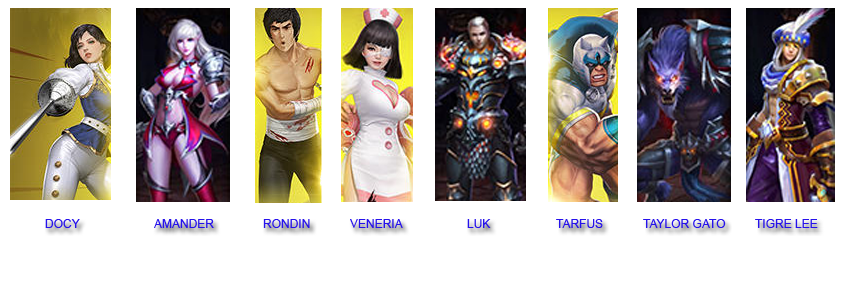
<style>
.page{position:relative;width:850px;height:300px;background:#ffffff}
.page>*{position:absolute;margin:0}
.t1{font:12px "ArialMT";color:#2612ec}
</style>
<div class="page">
<p class="t1" style="left:45px;top:219px;width:35px;height:9px">DOCY</p>
<p class="t1" style="left:154px;top:219px;width:60px;height:9px">AMANDER</p>
<p class="t1" style="left:263px;top:219px;width:47px;height:9px">RONDIN</p>
<p class="t1" style="left:350px;top:219px;width:53px;height:9px">VENERIA</p>
<p class="t1" style="left:467px;top:219px;width:24px;height:9px">LUK</p>
<p class="t1" style="left:556px;top:219px;width:47px;height:9px">TARFUS</p>
<p class="t1" style="left:643px;top:219px;width:83px;height:9px">TAYLOR GATO</p>
<p class="t1" style="left:755px;top:219px;width:63px;height:9px">TIGRE LEE</p>
</div>
